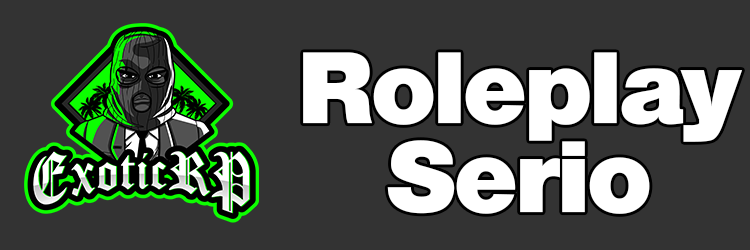
<style>
.page{position:relative;width:750px;height:250px;background:#333333}
.page>*{position:absolute;margin:0}
.t1{font:98px "MVSansBold";color:#ffffff}
</style>
<div class="page">
<p class="t1" style="left:303px;top:52px;width:439px;height:90px">Roleplay</p>
<p class="t1" style="left:387px;top:140px;width:263px;height:74px">Serio</p>
</div>
